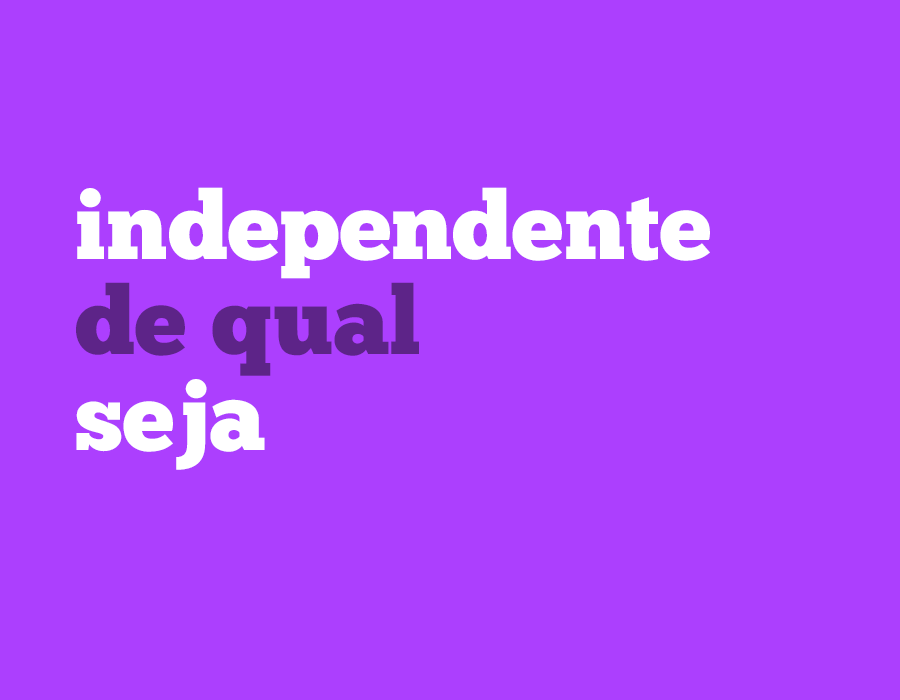
<style>
.page{position:relative;width:900px;height:700px;background:#ac3ffe}
.page>*{position:absolute;margin:0}
.t1{font:94.9px/95.9px "ChunkFive-Roman";color:#ffffff}
.t2{font:94.9px/95.9px "ChunkFive-Roman";color:#5d2488}
</style>
<div class="page">
<p class="t1" style="left:76px;top:187px;width:634px;height:283px">independente<br><span class="t2">de qual <br></span>seja</p>
</div>
